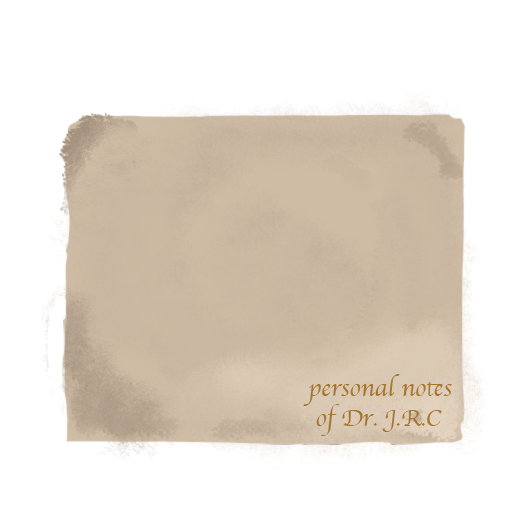
<style>
.page{position:relative;width:512px;height:512px;background:#ffffff}
.page>*{position:absolute;margin:0}
.t1{font:25px "Apple-Chancery";color:#a6762a}
</style>
<div class="page">
<p class="t1" style="left:303px;top:374px;width:149px;height:62px">personal notes<br> of Dr. J.R.C</p>
</div>
